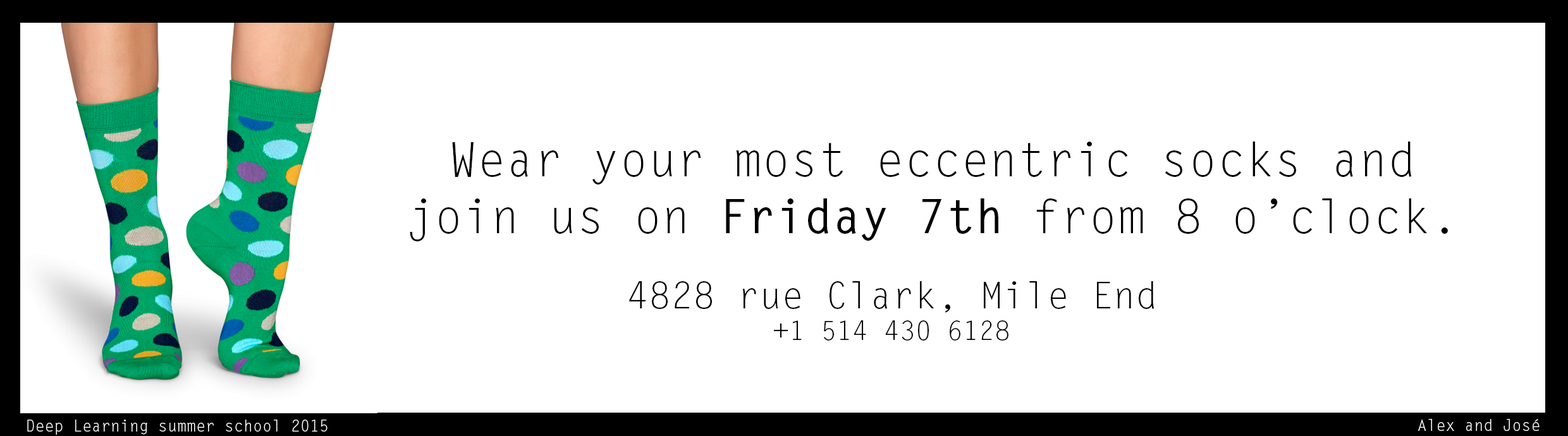
<style>
.page{position:relative;width:1568px;height:436px;background:#ffffff}
.page>*{position:absolute;margin:0}
.t1{font:47.4px "LetterGothicStd";color:#000000}
.t2{font:47.4px "LetterGothicStd-Bold";color:#000000}
.t3{font:36.9px "LetterGothicStd";color:#000000}
.t4{font:26.3px "LetterGothicStd";color:#000000}
.t5{font:15.8px "LetterGothicStd";color:#ffffff}
</style>
<div class="page">
<p class="t1" style="left:410px;top:142px;width:1038px;height:100px;text-align:center">Wear your most eccentric socks and<br>join us on <span class="t2">Friday 7th</span> from 8 o’clock.</p>
<p class="t3" style="left:629px;top:281px;width:526px;height:60px;text-align:center">4828 rue Clark, Mile End<br><span class="t4">+1 514 430 6128</span></p>
<p class="t5" style="left:27px;top:420px;width:301px;height:15px">Deep Learning summer school 2015</p>
<p class="t5" style="left:1418px;top:419px;width:122px;height:12px">Alex and José</p>
</div>
